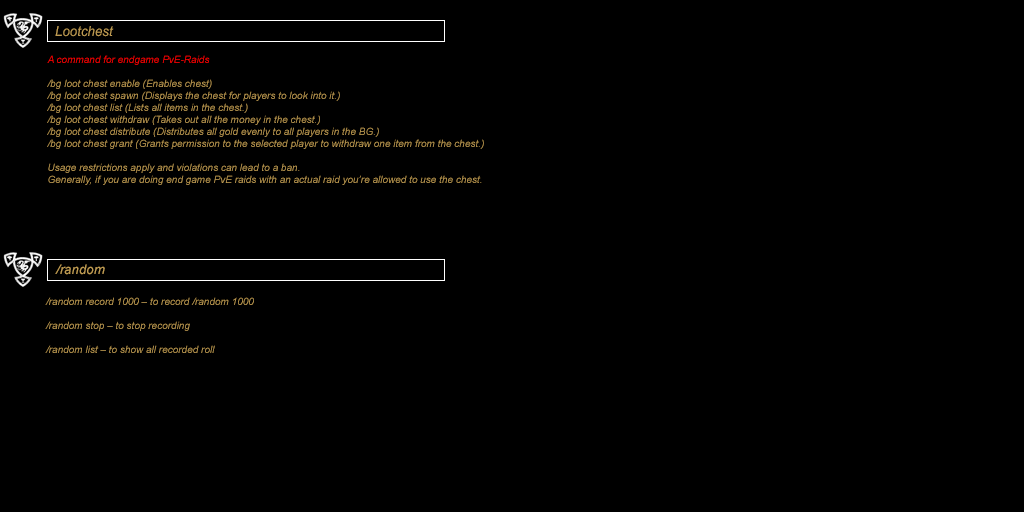
<style>
.page{position:relative;width:1024px;height:512px;background:#000000}
.page>*{position:absolute;margin:0}
.t1{font:14px "Arial-ItalicMT";color:#be9b53;scale:0.95 1}
.t2{font:10px "Arial-ItalicMT";color:#be9b53}
.t3{font:10px "Arial-ItalicMT";color:#ff0000}
.t4{font:13.3px "Arial-ItalicMT";color:#be9b53}
</style>
<div class="page">
<p class="t1" style="left:55px;top:26px;width:59px;height:11px">Lootchest</p>
<p class="t2" style="left:47px;top:55px;width:437px;height:130px"><span class="t3">A command for endgame PvE-Raids<br></span><br>/bg loot chest enable (Enables chest)<br>/bg loot chest spawn (Displays the chest for players to look into it.)<br>/bg loot chest list (Lists all items in the chest.)<br>/bg loot chest withdraw (Takes out all the money in the chest.)<br>/bg loot chest distribute (Distributes all gold evenly to all players in the BG.)<br>/bg loot chest grant (Grants permission to the selected player to withdraw one item from the chest.)<br><br>Usage restrictions apply and violations can lead to a ban.<br>Generally, if you are doing end game PvE raids with an actual raid you’re allowed to use the chest.</p>
<p class="t4" style="left:55px;top:264px;width:50px;height:11px">/random</p>
<p class="t2" style="left:45px;top:297px;width:209px;height:56px">/random record 1000 – to record /random 1000<br><br>/random stop – to stop recording<br><br>/random list – to show all recorded roll</p>
</div>
